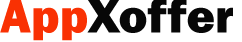
<style>
.page{position:relative;width:242px;height:42px;background:#ffffff}
.page>*{position:absolute;margin:0}
.t1{font:48.7px "FranklinGothic-Heavy";color:#070707}
.t2{font:48.7px "FranklinGothic-Heavy";color:#f93103}
</style>
<div class="page">
<p class="t1" style="left:0px;top:0px;width:233px;height:41px"><span class="t2">App</span>Xoffer</p>
</div>
